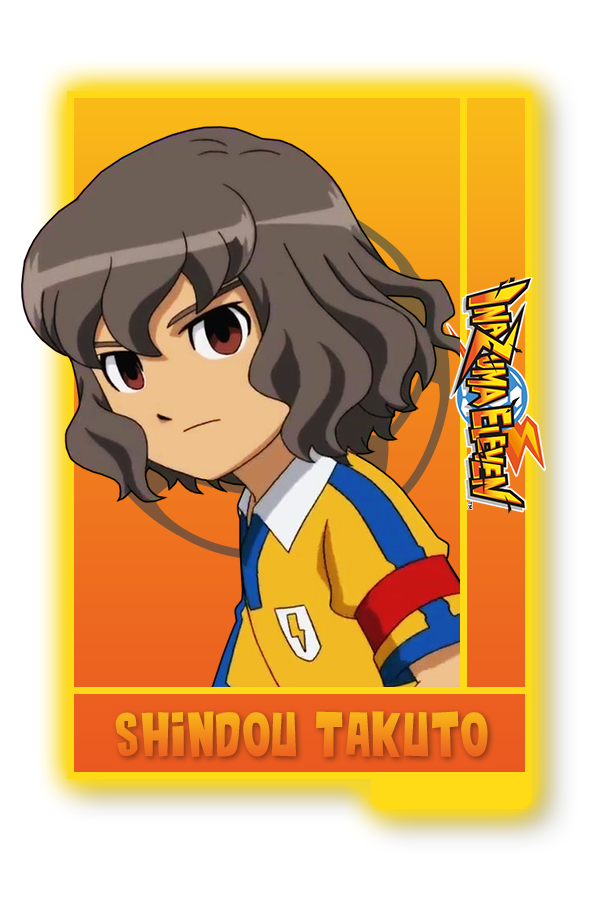
<style>
.page{position:relative;width:600px;height:900px;background:#ffffff}
.page>*{position:absolute;margin:0}
.t1{font:65.2px "TTG-Bold"}
</style>
<div class="page">
<p class="t1" style="left:115px;top:711px;width:373px;height:46px">Shindou Takuto</p>
</div>
